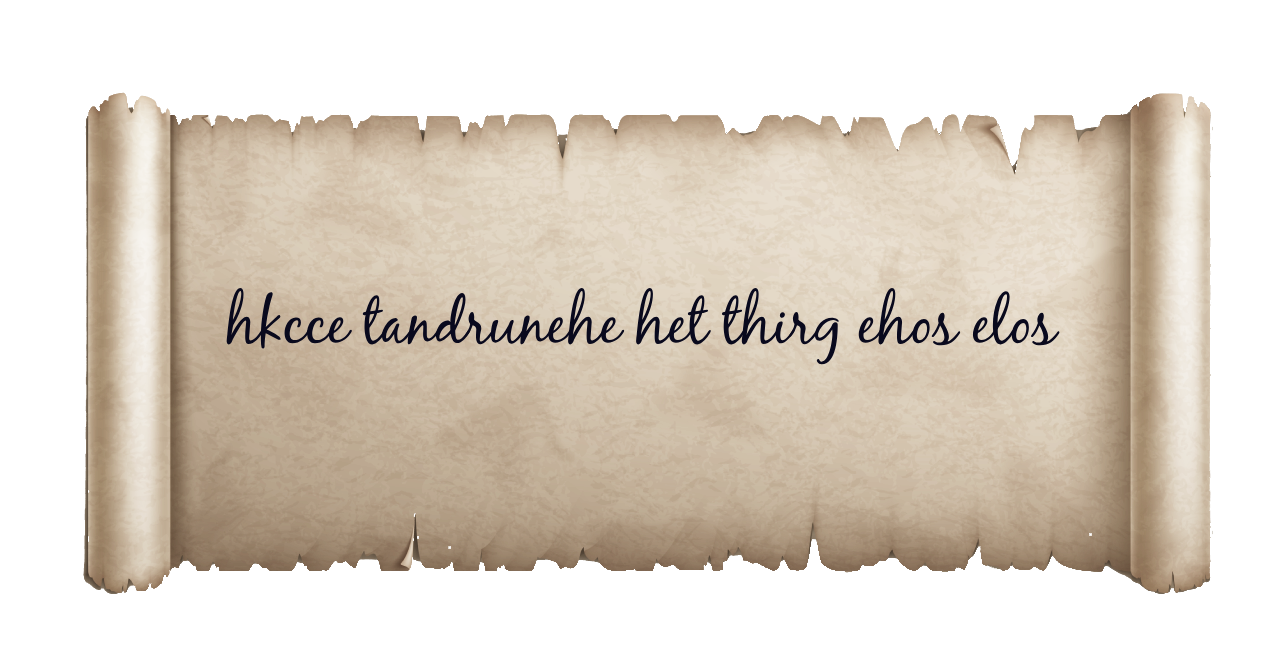
<style>
.page{position:relative;width:1286px;height:653px;background:#ffffff}
.page>*{position:absolute;margin:0}
.t1{font:61px "BlackJack";color:#09091d}
</style>
<div class="page">
<p class="t1" style="left:226px;top:287px;width:834px;height:78px">hkcce tandrunehe het thirg ehos elos</p>
</div>
